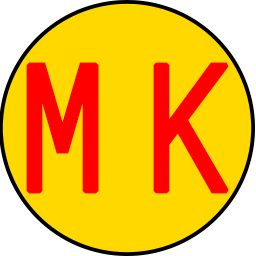
<style>
.page{position:relative;width:256px;height:256px;background:#ffd800}
.page>*{position:absolute;margin:0}
.t1{font:198px "AnonymousPro";letter-spacing:0.2em;color:#ff0000;font-weight:bold;scale:0.83 1}
</style>
<div class="page">
<p class="t1" style="left:26px;top:62px;width:203px;height:132px">МК</p>
</div>
